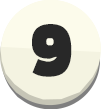
<style>
.page{position:relative;width:101px;height:109px;background:#f4f3e1}
.page>*{position:absolute;margin:0}
.t1{font:72px "MovaviGrotesqueBlack";color:#282828}
</style>
<div class="page">
<p class="t1" style="left:32px;top:24px;width:40px;height:53px">9</p>
</div>
